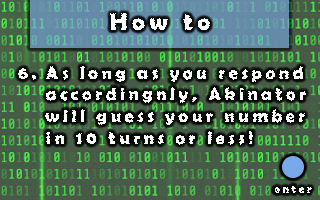
<style>
.page{position:relative;width:320px;height:200px}
.page>*{position:absolute;margin:0}
.t1{font:24px "BerlinSansFBDemi-Bold";letter-spacing:0.2em;color:#ffffff}
.t2{font:18px "BerlinSansFBDemi-Bold";letter-spacing:0.2em;color:#ffffff}
.t3{font:12px "BerlinSansFBDemi-Bold";letter-spacing:0.2em;color:#ffffff}
</style>
<div class="page">
<p class="t1" style="left:110px;top:13px;width:100px;height:18px">How to</p>
<p class="t2" style="left:18px;top:68px;width:18px;height:12px">6.</p>
<p class="t2" style="left:45px;top:66px;width:261px;height:79px">As long as you respond accordingnly, Akinator will guess your number in 10 turns or less!</p>
<p class="t3" style="left:274px;top:185px;width:38px;height:8px">enter</p>
</div>
